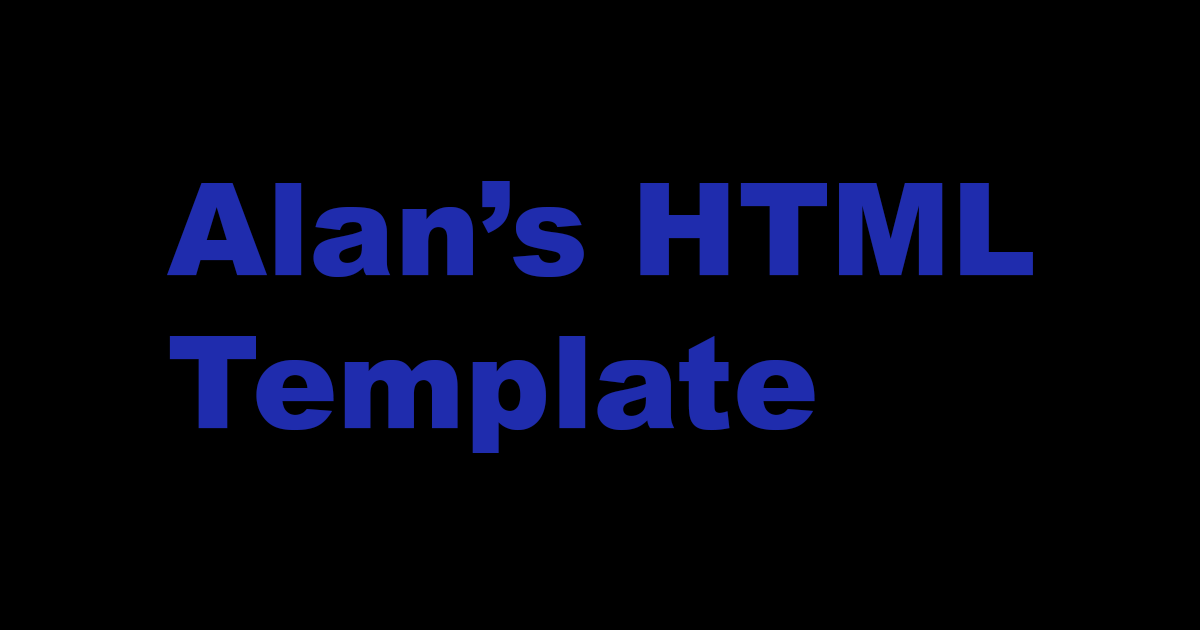
<style>
.page{position:relative;width:1200px;height:630px;background:#000000}
.page>*{position:absolute;margin:0}
.t1{font:128px "Arial-Black";color:#1f2cad}
</style>
<div class="page">
<p class="t1" style="left:167px;top:181px;width:866px;height:272px">Alan’s HTML<br>Template</p>
</div>
